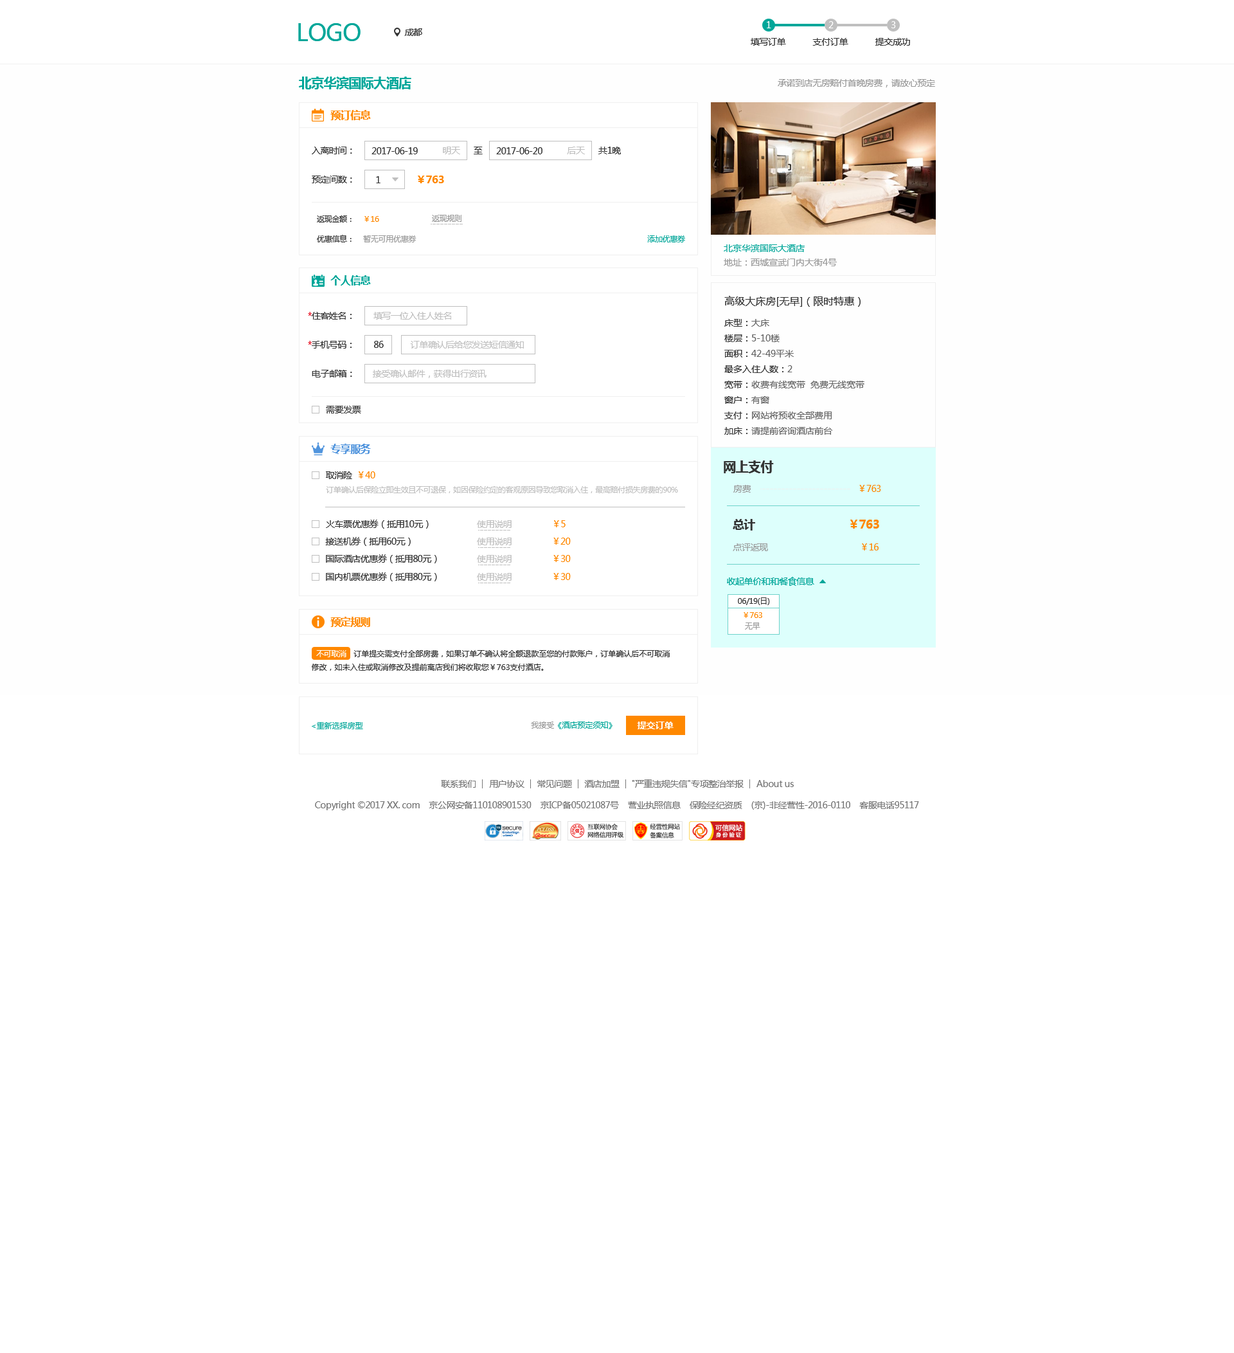
<style>
.page{position:relative;width:1234px;height:1353px;background:#ffffff}
.page>*{position:absolute;margin:0}
.t1{font:23.1px "MicrosoftYaHei";letter-spacing:-0.03em;color:#00a699}
.t2{font:9px "MicrosoftYaHei";letter-spacing:-0.03em;color:#333333}
.t3{font:9px "MicrosoftYaHei";letter-spacing:-0.03em;color:#ffffff}
.t4{font:12.9px "MicrosoftYaHei-Bold";letter-spacing:-0.03em;color:#00a699}
.t5{font:9px "MicrosoftYaHei";letter-spacing:-0.03em;color:#999999}
.t6{font:10.3px "MicrosoftYaHei-Bold";letter-spacing:-0.03em;color:#ff8800}
.t7{font:9px "MicrosoftYaHei";letter-spacing:-0.03em;color:#bfbfbf}
.t8{font:7.7px "MicrosoftYaHei";letter-spacing:-0.03em;color:#333333}
.t9{font:7.7px "MicrosoftYaHei";letter-spacing:-0.03em;color:#ff8800}
.t10{font:7.7px "MicrosoftYaHei";letter-spacing:-0.03em;color:#999999}
.t11{font:7.7px "MicrosoftYaHei";letter-spacing:-0.03em;color:#00a699}
.t12{font:9px "MicrosoftYaHei";color:#00a699}
.t13{font:9px "MicrosoftYaHei";color:#999999}
.t14{font:10.3px "MicrosoftYaHei-Bold";letter-spacing:-0.03em;color:#00a699}
.t15{font:10.3px "MicrosoftYaHei";color:#333333}
.t16{font:9px "MicrosoftYaHei";letter-spacing:-0.03em;color:#e60012}
.t17{font:9px "MicrosoftYaHei";color:#333333}
.t18{font:9px "MicrosoftYaHei";color:#666666}
.t19{font:10.3px "MicrosoftYaHei-Bold";letter-spacing:-0.03em;color:#5094dd}
.t20{font:12.9px "MicrosoftYaHei-Bold";letter-spacing:-0.03em;color:#333333}
.t21{font:9px "MicrosoftYaHei";letter-spacing:-0.03em;color:#ff8800}
.t22{font:7.7px "MicrosoftYaHei";letter-spacing:-0.03em;color:#bfbfbf}
.t23{font:11.6px "MicrosoftYaHei-Bold";letter-spacing:-0.03em;color:#333333}
.t24{font:11.6px "MicrosoftYaHei-Bold";letter-spacing:-0.03em;color:#ff8800}
.t25{font:9px "MicrosoftYaHei";letter-spacing:-0.03em;color:#00a699}
.t26{font:7.7px "MicrosoftYaHei";letter-spacing:-0.03em;color:#ffffff}
.t27{font:7.7px "MicrosoftYaHei";color:#333333}
.t28{font:7.7px "MicrosoftYaHei";color:#00a699}
.t29{font:7.7px "MicrosoftYaHei";color:#999999}
.t30{font:9px "MicrosoftYaHei-Bold";color:#ffffff}
.t31{font:9px "MicrosoftYaHei";letter-spacing:-0.03em;color:#777777}
</style>
<div class="page">
<p class="t1" style="left:298px;top:23px;width:63px;height:18px">LOGO</p>
<p class="t2" style="left:404px;top:28px;width:18px;height:8px">成都</p>
<p class="t3" style="left:767px;top:21px;width:4px;height:7px">1</p>
<p class="t3" style="left:829px;top:21px;width:5px;height:7px">2</p>
<p class="t3" style="left:892px;top:21px;width:4px;height:7px">3</p>
<p class="t2" style="left:751px;top:38px;width:35px;height:8px">填写订单</p>
<p class="t2" style="left:813px;top:38px;width:36px;height:8px">支付订单</p>
<p class="t2" style="left:876px;top:38px;width:34px;height:8px">提交成功</p>
<p class="t4" style="left:299px;top:76px;width:112px;height:13px">北京华滨国际大酒店</p>
<p class="t5" style="left:778px;top:79px;width:157px;height:8px">承诺到店无房赔付首晚房费，请放心预定</p>
<p class="t6" style="left:330px;top:110px;width:41px;height:10px">预订信息</p>
<p class="t2" style="left:312px;top:147px;width:40px;height:7px">入离时间：</p>
<p class="t2" style="left:372px;top:147px;width:46px;height:7px">2017-06-19</p>
<p class="t7" style="left:443px;top:147px;width:17px;height:7px">明天</p>
<p class="t2" style="left:474px;top:147px;width:9px;height:7px">至</p>
<p class="t2" style="left:496px;top:147px;width:47px;height:7px">2017-06-20</p>
<p class="t7" style="left:567px;top:147px;width:18px;height:7px">后天</p>
<p class="t2" style="left:598px;top:147px;width:23px;height:7px">共1晚</p>
<p class="t2" style="left:312px;top:176px;width:40px;height:7px">预定间数：</p>
<p class="t2" style="left:376px;top:176px;width:5px;height:7px">1</p>
<p class="t6" style="left:418px;top:176px;width:26px;height:7px">￥763</p>
<p class="t8" style="left:317px;top:215px;width:35px;height:7px">返现金额：</p>
<p class="t9" style="left:364px;top:216px;width:15px;height:6px">￥16</p>
<p class="t10" style="left:432px;top:215px;width:30px;height:7px">返现规则</p>
<p class="t8" style="left:317px;top:235px;width:35px;height:7px">优惠信息：</p>
<p class="t10" style="left:363px;top:235px;width:54px;height:7px">暂无可用优惠券</p>
<p class="t11" style="left:647px;top:235px;width:38px;height:7px">添加优惠券</p>
<p class="t12" style="left:724px;top:244px;width:81px;height:8px">北京华滨国际大酒店</p>
<p class="t13" style="left:724px;top:258px;width:113px;height:8px">地址：西城宣武门内大街4号</p>
<p class="t14" style="left:330px;top:275px;width:41px;height:10px">个人信息</p>
<p class="t15" style="left:724px;top:296px;width:137px;height:11px">高级大床房[无早]（限时特惠）</p>
<p class="t2" style="left:308px;top:312px;width:44px;height:8px"><span class="t16">*</span>住客姓名：</p>
<p class="t7" style="left:374px;top:312px;width:78px;height:8px">填写一位入住人姓名</p>
<p class="t17" style="left:724px;top:319px;width:46px;height:8px">床型：<span class="t18">大床</span></p>
<p class="t2" style="left:308px;top:341px;width:44px;height:7px"><span class="t16">*</span>手机号码：</p>
<p class="t2" style="left:374px;top:341px;width:10px;height:7px">86</p>
<p class="t7" style="left:410px;top:341px;width:114px;height:7px">订单确认后给您发送短信通知</p>
<p class="t18" style="left:724px;top:334px;width:56px;height:8px"><span class="t17">楼层：</span>5-10楼</p>
<p class="t18" style="left:724px;top:350px;width:70px;height:7px"><span class="t17">面积：</span>42-49平米</p>
<p class="t17" style="left:724px;top:365px;width:69px;height:8px">最多入住人数：<span class="t18">2</span></p>
<p class="t2" style="left:312px;top:370px;width:40px;height:7px">电子邮箱：</p>
<p class="t7" style="left:373px;top:370px;width:114px;height:8px">接受确认邮件，获得出行资讯</p>
<p class="t18" style="left:724px;top:381px;width:141px;height:7px"><span class="t17">宽带：</span>收费有线宽带  免费无线宽带</p>
<p class="t17" style="left:724px;top:396px;width:46px;height:8px">窗户：<span class="t18">有窗</span></p>
<p class="t2" style="left:326px;top:406px;width:35px;height:7px">需要发票</p>
<p class="t18" style="left:724px;top:411px;width:108px;height:8px"><span class="t17">支付：</span>网站将预收全部费用</p>
<p class="t18" style="left:724px;top:427px;width:109px;height:8px"><span class="t17">加床：</span>请提前咨询酒店前台</p>
<p class="t19" style="left:330px;top:444px;width:41px;height:10px">专享服务</p>
<p class="t20" style="left:724px;top:460px;width:50px;height:13px">网上支付</p>
<p class="t2" style="left:326px;top:471px;width:26px;height:8px">取消险</p>
<p class="t21" style="left:359px;top:471px;width:16px;height:7px">￥40</p>
<p class="t5" style="left:734px;top:485px;width:17px;height:7px">房费</p>
<p class="t21" style="left:860px;top:485px;width:21px;height:7px">￥763</p>
<p class="t22" style="left:326px;top:486px;width:352px;height:7px">订单确认后保险立即生效且不可退保，如因保险约定的客观原因导致您取消入住，最高赔付损失房费的90%</p>
<p class="t2" style="left:326px;top:519px;width:103px;height:9px">火车票优惠券（抵用10元）</p>
<p class="t7" style="left:477px;top:520px;width:35px;height:8px">使用说明</p>
<p class="t21" style="left:554px;top:520px;width:12px;height:7px">￥5</p>
<p class="t23" style="left:733px;top:519px;width:22px;height:11px">总计</p>
<p class="t24" style="left:850px;top:519px;width:29px;height:9px">￥763</p>
<p class="t2" style="left:325px;top:537px;width:86px;height:9px">接送机券（抵用60元）</p>
<p class="t7" style="left:477px;top:537px;width:35px;height:8px">使用说明</p>
<p class="t21" style="left:554px;top:537px;width:17px;height:7px">￥20</p>
<p class="t5" style="left:733px;top:543px;width:35px;height:8px">点评返现</p>
<p class="t21" style="left:862px;top:543px;width:17px;height:7px">￥16</p>
<p class="t2" style="left:326px;top:554px;width:111px;height:9px">国际酒店优惠券（抵用80元）</p>
<p class="t7" style="left:477px;top:555px;width:35px;height:7px">使用说明</p>
<p class="t21" style="left:554px;top:555px;width:17px;height:7px">￥30</p>
<p class="t2" style="left:326px;top:572px;width:111px;height:9px">国内机票优惠券（抵用80元）</p>
<p class="t7" style="left:477px;top:573px;width:35px;height:7px">使用说明</p>
<p class="t21" style="left:554px;top:573px;width:17px;height:7px">￥30</p>
<p class="t25" style="left:727px;top:577px;width:88px;height:9px">收起单价和和餐食信息</p>
<p class="t8" style="left:738px;top:597px;width:32px;height:8px">06/19(日)</p>
<p class="t6" style="left:330px;top:616px;width:40px;height:11px">预定规则</p>
<p class="t9" style="left:744px;top:612px;width:18px;height:6px">￥763</p>
<p class="t10" style="left:745px;top:622px;width:15px;height:7px">无早</p>
<p class="t26" style="left:316px;top:650px;width:30px;height:7px">不可取消</p>
<p class="t27" style="left:354px;top:650px;width:316px;height:7px">订单提交需支付全部房费，如果订单不确认将全额退款至您的付款账户，订单确认后不可取消</p>
<p class="t27" style="left:312px;top:663px;width:232px;height:7px">修改，如未入住或取消修改及提前离店我们将收取您￥763支付酒店。</p>
<p class="t28" style="left:312px;top:722px;width:51px;height:7px">&lt;重新选择房型</p>
<p class="t28" style="left:531px;top:721px;width:82px;height:8px"><span class="t29">我接受</span>《酒店预定须知》</p>
<p class="t30" style="left:637px;top:721px;width:37px;height:8px">提交订单</p>
<p class="t31" style="left:441px;top:780px;width:35px;height:8px">联系我们</p>
<p class="t31" style="left:489px;top:780px;width:36px;height:8px">用户协议</p>
<p class="t31" style="left:537px;top:780px;width:35px;height:8px">常见问题</p>
<p class="t31" style="left:584px;top:780px;width:36px;height:8px">酒店加盟</p>
<p class="t31" style="left:632px;top:779px;width:112px;height:9px">"严重违规失信"专项整治举报</p>
<p class="t31" style="left:757px;top:780px;width:37px;height:7px">About us</p>
<p class="t31" style="left:315px;top:801px;width:604px;height:9px">Copyright ©2017 XX. com    京公网安备110108901530    京ICP备05021087号    营业执照信息    保险经纪资质    (京)-非经营性-2016-0110    客服电话95117</p>
</div>
